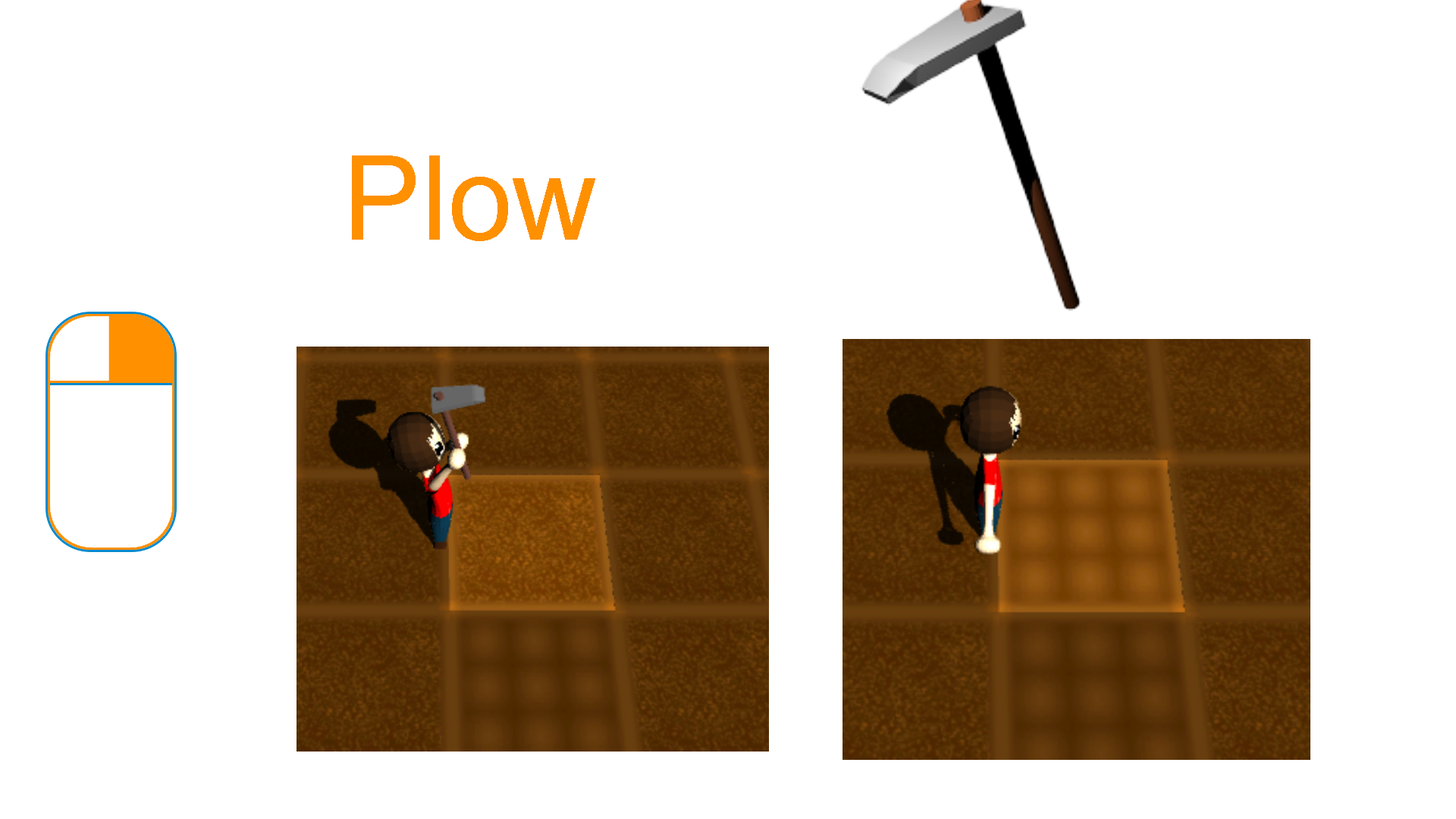
<style>
.page{position:relative;width:1456px;height:819px;background:#ffffff}
.page>*{position:absolute;margin:0}
.t1{font:117.3px "ArialMT";color:#ff9000}
</style>
<div class="page">
<p class="t1" style="left:352px;top:155px;width:243px;height:86px">Plow</p>
</div>
